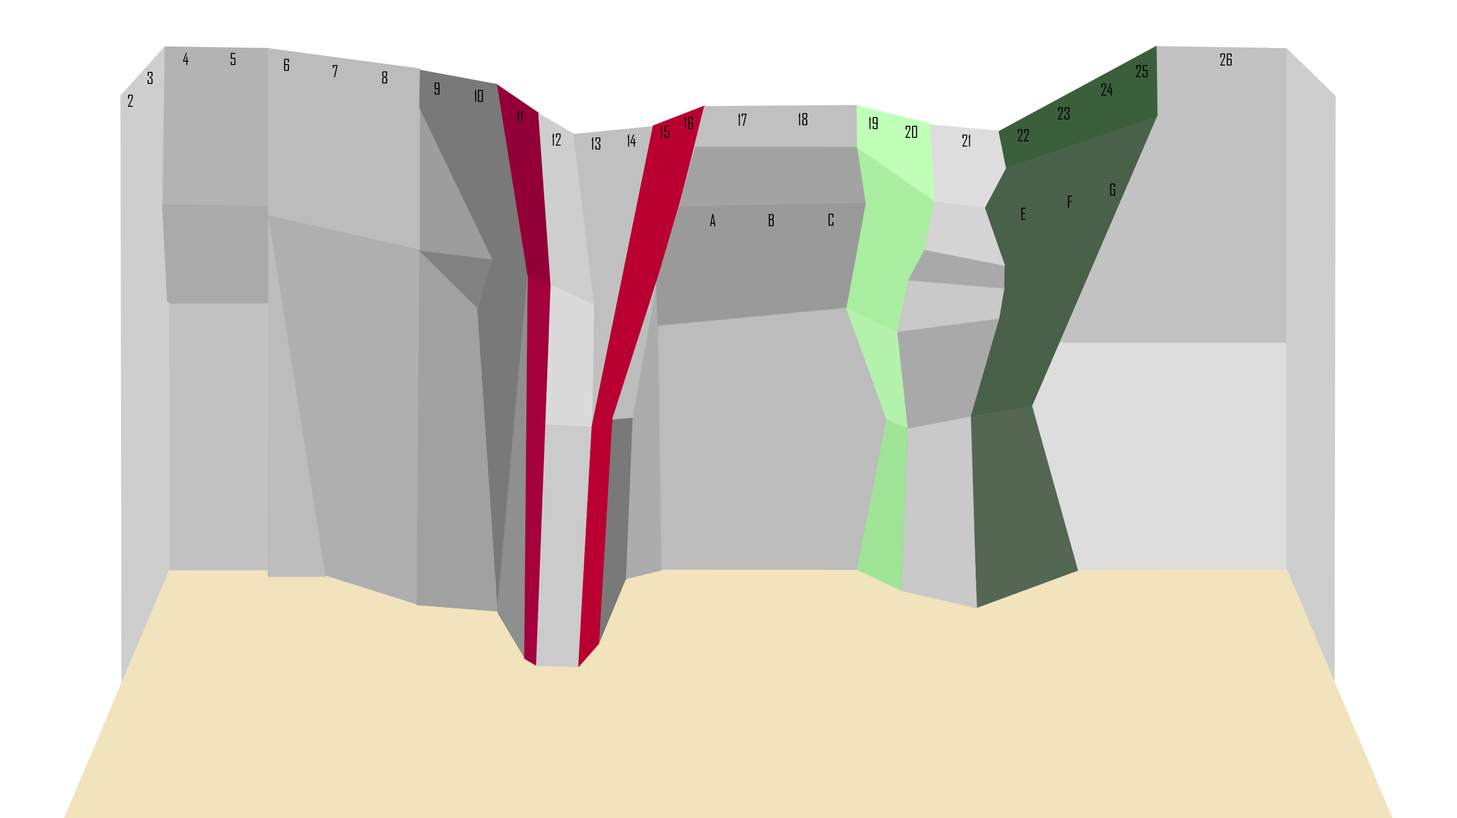
<style>
.page{position:relative;width:1457px;height:818px;background:#ffffff}
.page>*{position:absolute;margin:0}
.t1{font:16.2px "AgencyFB-Reg";color:#000000}
</style>
<div class="page">
<p class="t1" style="left:183px;top:53px;width:5px;height:12px">4</p>
<p class="t1" style="left:230px;top:53px;width:6px;height:12px">5</p>
<p class="t1" style="left:1220px;top:53px;width:12px;height:13px">26</p>
<p class="t1" style="left:284px;top:59px;width:5px;height:12px">6</p>
<p class="t1" style="left:333px;top:65px;width:5px;height:12px">7</p>
<p class="t1" style="left:1136px;top:65px;width:12px;height:12px">25</p>
<p class="t1" style="left:147px;top:72px;width:6px;height:12px">3</p>
<p class="t1" style="left:382px;top:71px;width:6px;height:13px">8</p>
<p class="t1" style="left:434px;top:83px;width:6px;height:12px">9</p>
<p class="t1" style="left:475px;top:90px;width:8px;height:12px">10</p>
<p class="t1" style="left:1101px;top:84px;width:12px;height:12px">24</p>
<p class="t1" style="left:128px;top:95px;width:5px;height:12px">2</p>
<p class="t1" style="left:517px;top:111px;width:6px;height:12px">11</p>
<p class="t1" style="left:738px;top:114px;width:9px;height:12px">17</p>
<p class="t1" style="left:798px;top:113px;width:10px;height:12px">18</p>
<p class="t1" style="left:1058px;top:107px;width:12px;height:12px">23</p>
<p class="t1" style="left:661px;top:126px;width:8px;height:12px">15</p>
<p class="t1" style="left:684px;top:117px;width:10px;height:12px">16</p>
<p class="t1" style="left:869px;top:117px;width:9px;height:12px">19</p>
<p class="t1" style="left:905px;top:126px;width:12px;height:12px">20</p>
<p class="t1" style="left:552px;top:134px;width:9px;height:12px">12</p>
<p class="t1" style="left:592px;top:137px;width:9px;height:13px">13</p>
<p class="t1" style="left:628px;top:135px;width:8px;height:12px">14</p>
<p class="t1" style="left:962px;top:135px;width:8px;height:12px">21</p>
<p class="t1" style="left:1018px;top:129px;width:11px;height:12px">22</p>
<p class="t1" style="left:1110px;top:184px;width:6px;height:12px">G</p>
<p class="t1" style="left:1068px;top:196px;width:4px;height:12px">F</p>
<p class="t1" style="left:1021px;top:208px;width:5px;height:12px">E</p>
<p class="t1" style="left:710px;top:214px;width:6px;height:12px">A</p>
<p class="t1" style="left:768px;top:214px;width:6px;height:12px">B</p>
<p class="t1" style="left:828px;top:214px;width:6px;height:12px">C</p>
</div>
